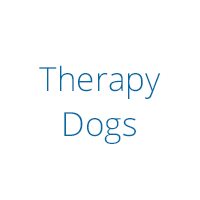
<style>
.page{position:relative;width:200px;height:200px;background:#ffffff}
.page>*{position:absolute;margin:0}
.t1{font:33.3px "OpenSans-Light";color:#006ba4}
</style>
<div class="page">
<p class="t1" style="left:39px;top:65px;width:122px;height:34px">Therapy</p>
<p class="t1" style="left:64px;top:112px;width:72px;height:32px">Dogs</p>
</div>
